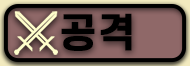
<style>
.page{position:relative;width:190px;height:66px}
.page>*{position:absolute;margin:0}
.t1{font:39px "S-CoreDream-6Bold";color:#000000;font-weight:bold}
</style>
<div class="page">
<p class="t1" style="left:61px;top:13px;width:71px;height:38px">공격</p>
</div>
